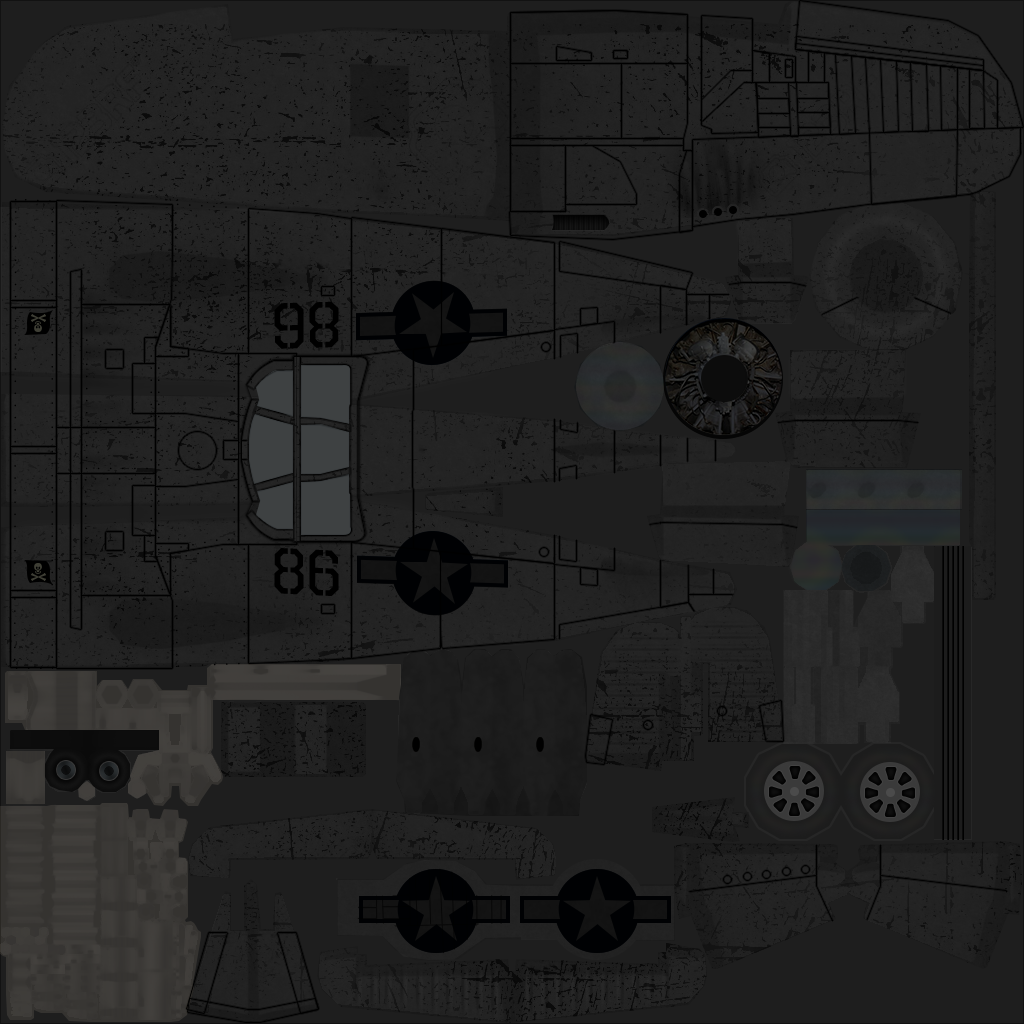
<style>
.page{position:relative;width:1024px;height:1024px;background:#1e1e1e}
.page>*{position:absolute;margin:0}
.t1{font:65px "OctinStencilRg-Regular";color:#000000}
</style>
<div class="page">
<p class="t1" style="left:274px;top:301px;width:65px;height:48px;rotate:178deg">86</p>
<p class="t1" style="left:274px;top:548px;width:65px;height:48px;rotate:3deg">86</p>
</div>
